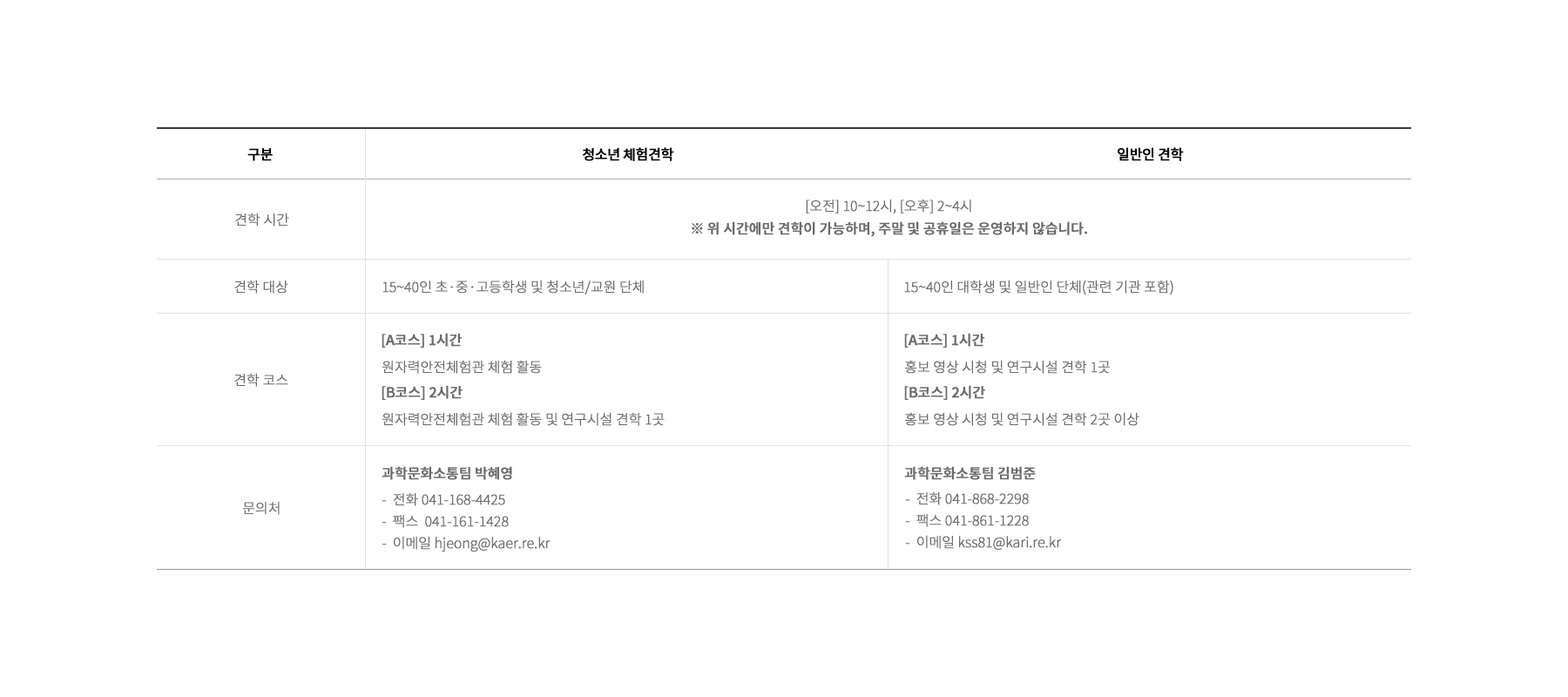
<style>
.page{position:relative;width:1568px;height:697px;background:#ffffff}
.page>*{position:absolute;margin:0}
.t1{font:13.9px "NotoSansKR-Regular";letter-spacing:-0.041em;color:#010101;font-weight:bold}
.t2{font:13.9px "NotoSansKR-Light";letter-spacing:-0.025em;color:#6a6a6a;font-weight:bold}
.t3{font:13.9px "NotoSansKR-Light";letter-spacing:-0.02em;color:#6a6a6a;font-weight:bold}
.t4{font:13.9px "NotoSansKR-Medium";letter-spacing:-0.025em;color:#6a6a6a;font-weight:bold}
.t5{font:13.9px/21.8px "NotoSansKR-Light";letter-spacing:-0.025em;color:#6a6a6a;font-weight:bold}
</style>
<div class="page">
<p class="t1" style="left:247px;top:148px;width:26px;height:13px">구분</p>
<p class="t1" style="left:583px;top:147px;width:91px;height:14px">청소년 체험견학</p>
<p class="t1" style="left:1118px;top:147px;width:66px;height:14px">일반인 견학</p>
<p class="t2" style="left:806px;top:199px;width:165px;height:14px">[오전] 10~12시, [오후] 2~4시</p>
<p class="t3" style="left:235px;top:213px;width:54px;height:13px">견학 시간</p>
<p class="t4" style="left:692px;top:221px;width:395px;height:16px">※ 위 시간에만 견학이 가능하며, 주말 및 공휴일은 운영하지 않습니다.</p>
<p class="t3" style="left:234px;top:280px;width:54px;height:14px">견학 대상</p>
<p class="t2" style="left:382px;top:280px;width:262px;height:14px">15~40인 초·중·고등학생 및 청소년/교원 단체</p>
<p class="t2" style="left:904px;top:280px;width:269px;height:15px">15~40인 대학생 및 일반인 단체(관련 기관 포함)</p>
<p class="t4" style="left:382px;top:333px;width:80px;height:15px">[A코스] 1시간</p>
<p class="t4" style="left:904px;top:333px;width:80px;height:15px">[A코스] 1시간</p>
<p class="t2" style="left:382px;top:360px;width:160px;height:14px">원자력안전체험관 체험 활동</p>
<p class="t2" style="left:905px;top:360px;width:205px;height:14px">홍보 영상 시청 및 연구시설 견학 1곳</p>
<p class="t3" style="left:234px;top:373px;width:54px;height:14px">견학 코스</p>
<p class="t4" style="left:382px;top:385px;width:81px;height:15px">[B코스] 2시간</p>
<p class="t4" style="left:904px;top:385px;width:81px;height:15px">[B코스] 2시간</p>
<p class="t2" style="left:382px;top:412px;width:283px;height:14px">원자력안전체험관 체험 활동 및 연구시설 견학 1곳</p>
<p class="t2" style="left:905px;top:412px;width:234px;height:14px">홍보 영상 시청 및 연구시설 견학 2곳 이상</p>
<p class="t4" style="left:382px;top:466px;width:130px;height:14px">과학문화소통팀 박혜영</p>
<p class="t4" style="left:904px;top:466px;width:132px;height:14px">과학문화소통팀 김범준</p>
<p class="t5" style="left:382px;top:493px;width:169px;height:59px">-  전화 041-168-4425<br>-  팩스  041-161-1428<br>-  이메일 hjeong@kaer.re.kr</p>
<p class="t5" style="left:905px;top:492px;width:157px;height:58px">-  전화 041-868-2298<br>-  팩스 041-861-1228<br>-  이메일 kss81@kari.re.kr</p>
<p class="t3" style="left:243px;top:502px;width:37px;height:13px">문의처</p>
</div>
